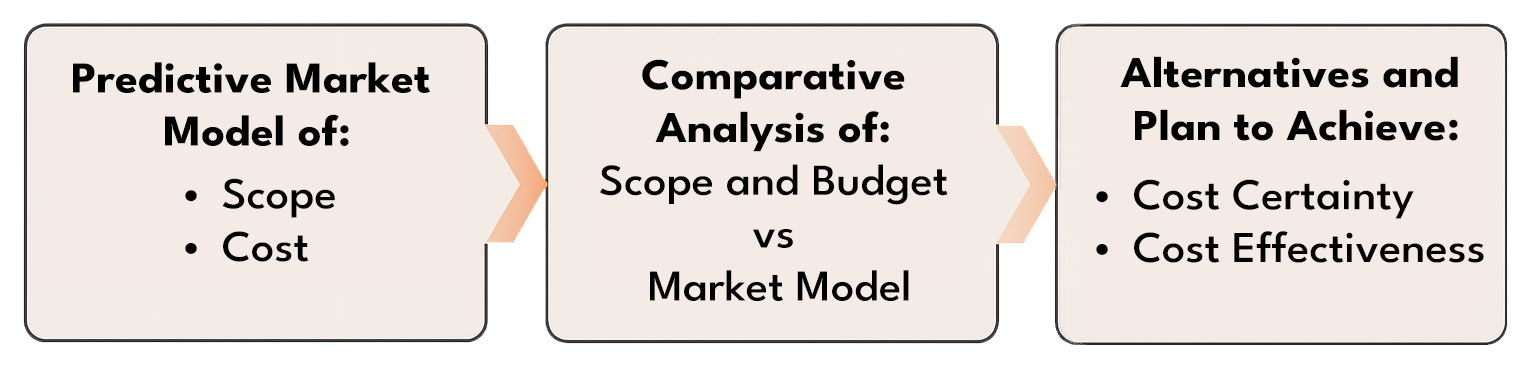
<style>
.page{position:relative;width:1536px;height:366px;background:#f4ebe7}
.page>*{position:absolute;margin:0}
.t1{font:44px "LeagueSpartan-Bold";color:#000000;scale:1.05 1}
.t2{font:44px "LeagueSpartan-Medium";color:#000000;scale:1.05 1}
</style>
<div class="page">
<p class="t1" style="left:73px;top:62px;width:358px;height:84px;text-align:center">Predictive Market <br>Model of:</p>
<p class="t2" style="left:600px;top:59px;width:348px;height:242px;text-align:center"><span class="t1">Comparative <br>Analysis of: <br></span>Scope and Budget <br>vs <br>Market Model</p>
<p class="t1" style="left:1120px;top:56px;width:338px;height:85px;text-align:center">Alternatives and <br>Plan to Achieve:</p>
<p class="t2" style="left:185px;top:178px;width:150px;height:84px;text-align:center"><span class="t1"><br></span>Scope<br>Cost</p>
<p class="t2" style="left:1096px;top:179px;width:388px;height:84px;text-align:center"><span class="t1"><br></span>Cost Certainty<br>Cost Effectiveness</p>
</div>
